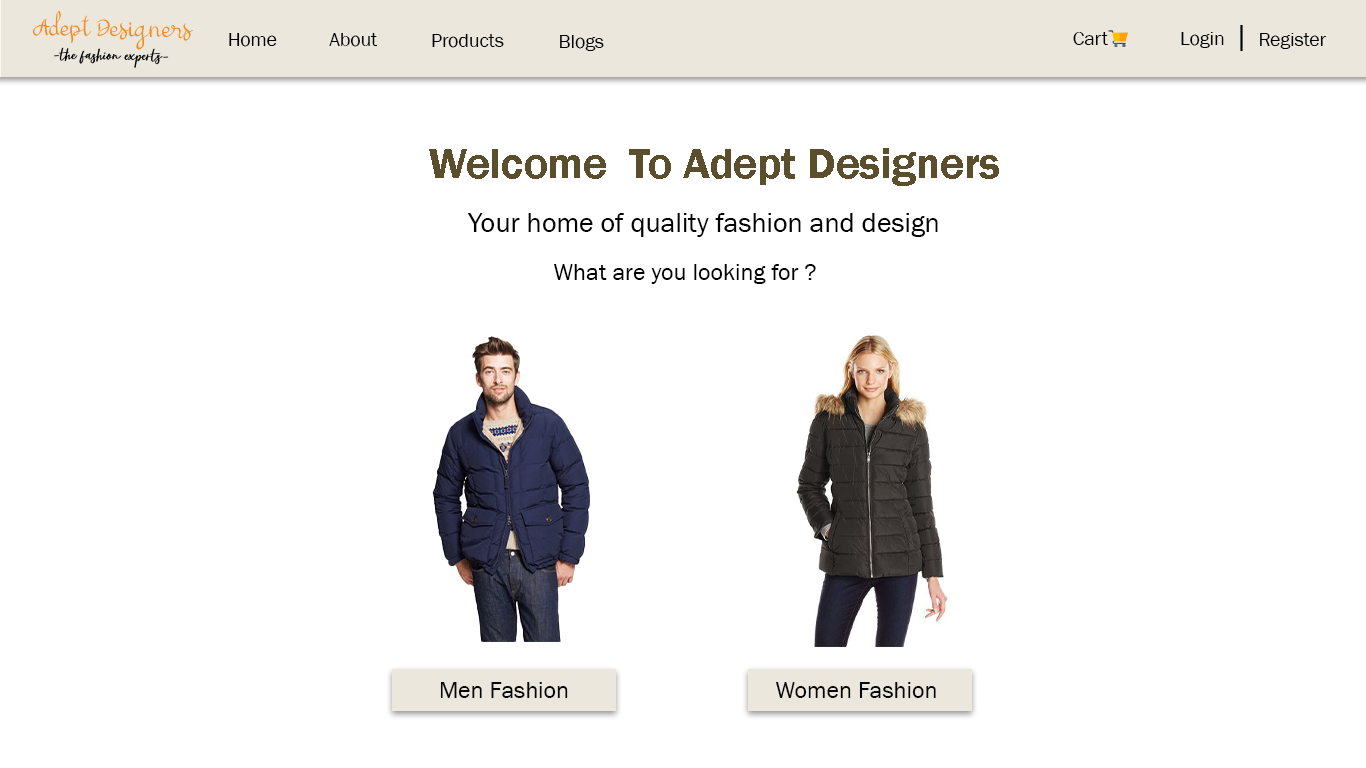
<style>
.page{position:relative;width:1366px;height:768px;background:#ffffff}
.page>*{position:absolute;margin:0}
.t1{font:31.6px "FranklinGothic-Book";color:#000000}
.t2{font:19.6px "FranklinGothic-Book";color:#000000}
.t3{font:44px "FranklinGothic-Demi";color:#5b4e2d}
.t4{font:28px "FranklinGothic-Book";color:#000000}
.t5{font:24px "FranklinGothic-Book";color:#000000}
.t6{font:24px "FranklinGothic-Book";color:#070707}
</style>
<div class="page">
<p class="t1" style="left:1240px;top:25px;width:3px;height:26px">|</p>
<p class="t2" style="left:229px;top:33px;width:48px;height:14px">Home</p>
<p class="t2" style="left:329px;top:33px;width:49px;height:14px">About</p>
<p class="t2" style="left:432px;top:34px;width:72px;height:14px">Products</p>
<p class="t2" style="left:560px;top:35px;width:44px;height:16px">Blogs</p>
<p class="t2" style="left:1073px;top:32px;width:35px;height:13px">Cart</p>
<p class="t2" style="left:1181px;top:32px;width:43px;height:16px">Login</p>
<p class="t2" style="left:1260px;top:33px;width:66px;height:16px">Register</p>
<p class="t3" style="left:429px;top:148px;width:570px;height:38px">Welcome  To Adept Designers</p>
<p class="t4" style="left:467px;top:213px;width:471px;height:24px">Your home of quality fashion and design</p>
<p class="t5" style="left:554px;top:264px;width:262px;height:20px">What are you looking for ?</p>
<p class="t6" style="left:440px;top:682px;width:128px;height:16px">Men Fashion</p>
<p class="t6" style="left:776px;top:682px;width:160px;height:16px">Women Fashion</p>
</div>
